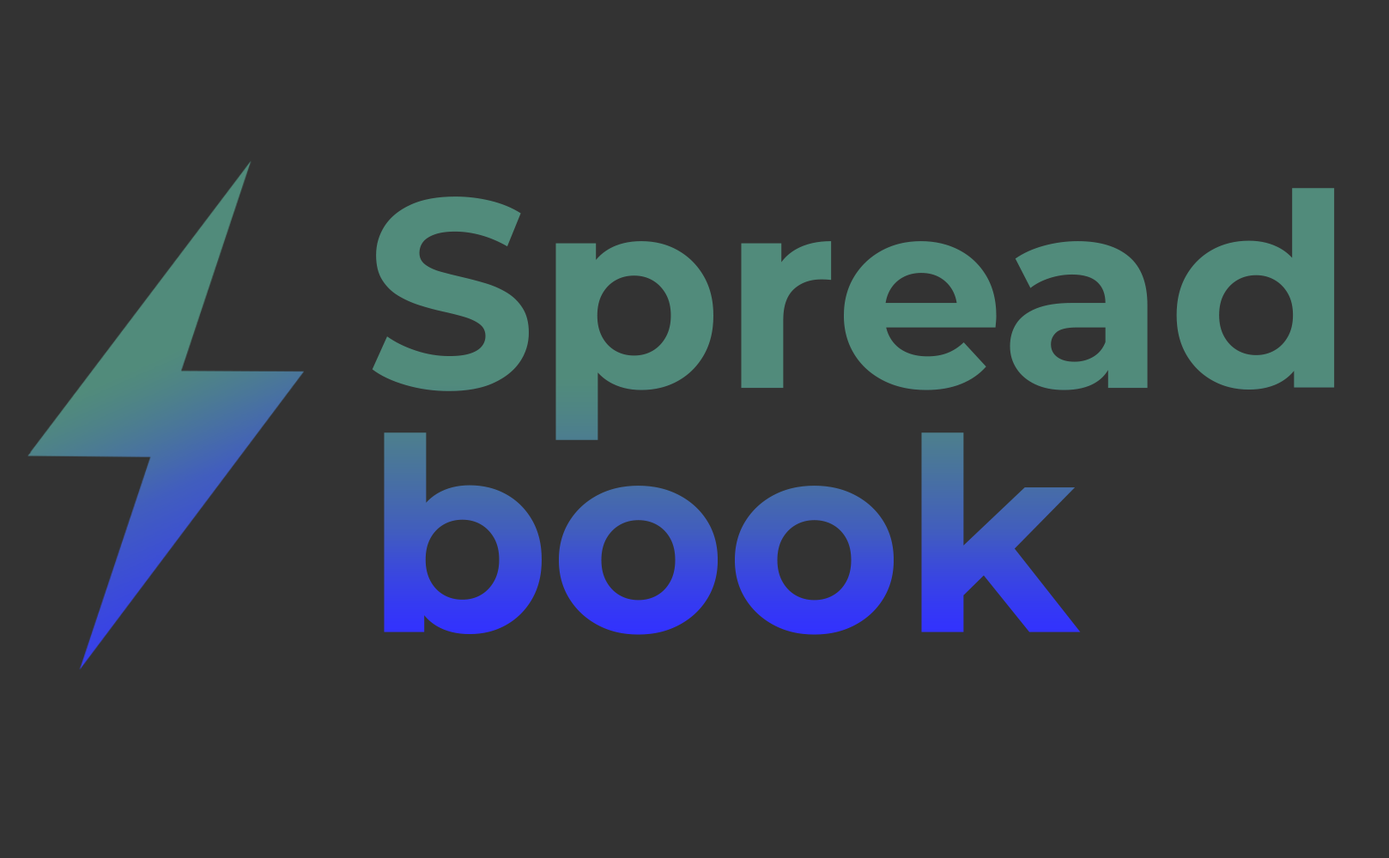
<style>
.page{position:relative;width:1389px;height:858px;background:#333333}
.page>*{position:absolute;margin:0}
.t1{font:268.6px/244.2px "Montserrat-Bold"}
</style>
<div class="page">
<p class="t1" style="left:372px;top:188px;width:963px;height:447px">Spread<br>book</p>
</div>
